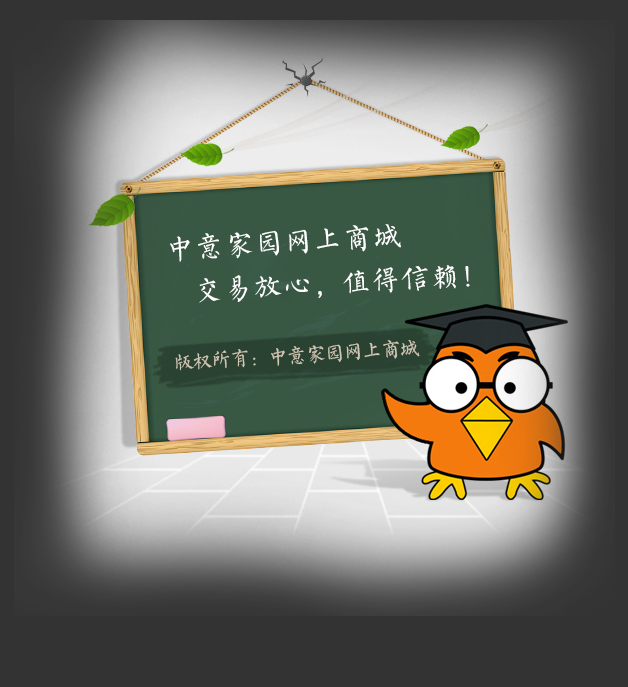
<style>
.page{position:relative;width:628px;height:687px}
.page>*{position:absolute;margin:0}
.t1{font:28.5px "FZSXSLKJW--GB1-0";letter-spacing:0.04em;color:#fffffe;text-transform:uppercase}
.t2{font:20.1px "FZSXSLKJW--GB1-0";letter-spacing:-0.06em;color:#d2c7b4;text-transform:uppercase}
</style>
<div class="page">
<p class="t1" style="left:170px;top:224px;width:231px;height:38px;rotate:-3deg">中意家园网上商城</p>
<p class="t1" style="left:199px;top:265px;width:271px;height:38px;rotate:-3deg">交易放心，值得信赖！</p>
<p class="t2" style="left:175px;top:339px;width:245px;height:32px;rotate:-3deg">版权所有：中意家园网上商城</p>
</div>
